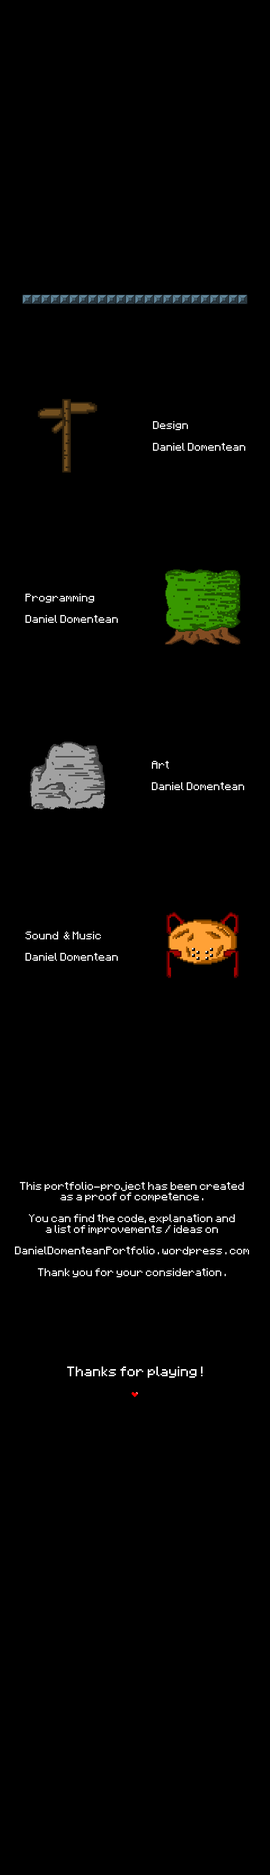
<style>
.page{position:relative;width:270px;height:1875px;background:#000000}
.page>*{position:absolute;margin:0}
.t1{font:9px "Minecraftia-Regular";color:#ffffff}
.t2{font:11.2px "Minecraftia-Regular";color:#ffffff}
</style>
<div class="page">
<p class="t1" style="left:153px;top:421px;width:92px;height:30px">Design<br><br>Daniel Domentean</p>
<p class="t1" style="left:26px;top:594px;width:92px;height:29px">Programming<br><br>Daniel Domentean</p>
<p class="t1" style="left:152px;top:761px;width:92px;height:29px">Art<br><br>Daniel Domentean</p>
<p class="t1" style="left:26px;top:932px;width:92px;height:29px">Sound  &amp; Music<br><br>Daniel Domentean</p>
<p class="t1" style="left:15px;top:1182px;width:234px;height:95px;text-align:center">This portfolio-project has been created<br>as a proof of competence .<br><br>You can find the code, explanation and<br>a list of improvements / ideas on<br><br>DanielDomenteanPortfolio . wordpress . com<br><br>Thank you for your consideration .</p>
<p class="t2" style="left:67px;top:1366px;width:135px;height:12px">Thanks for playing !</p>
</div>
